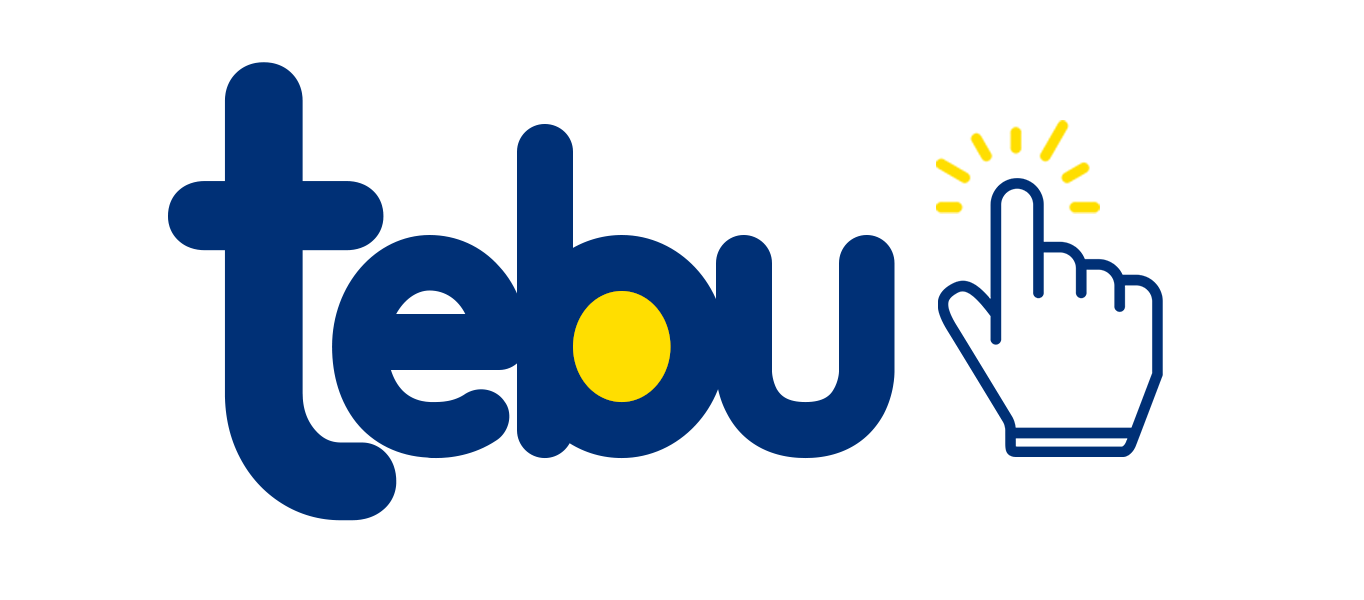
<style>
.page{position:relative;width:1364px;height:600px;background:#ffffff}
.page>*{position:absolute;margin:0}
.t1{font:612.3px "Comfortaa-Bold";letter-spacing:-0.1em;color:#013076;font-weight:bold}
.t2{font:477.8px "Odin-Bold";letter-spacing:-0.1em;color:#013076}
</style>
<div class="page">
<p class="t1" style="left:168px;top:62px;width:229px;height:459px">t</p>
<p class="t2" style="left:332px;top:124px;width:563px;height:335px">ebu</p>
</div>
